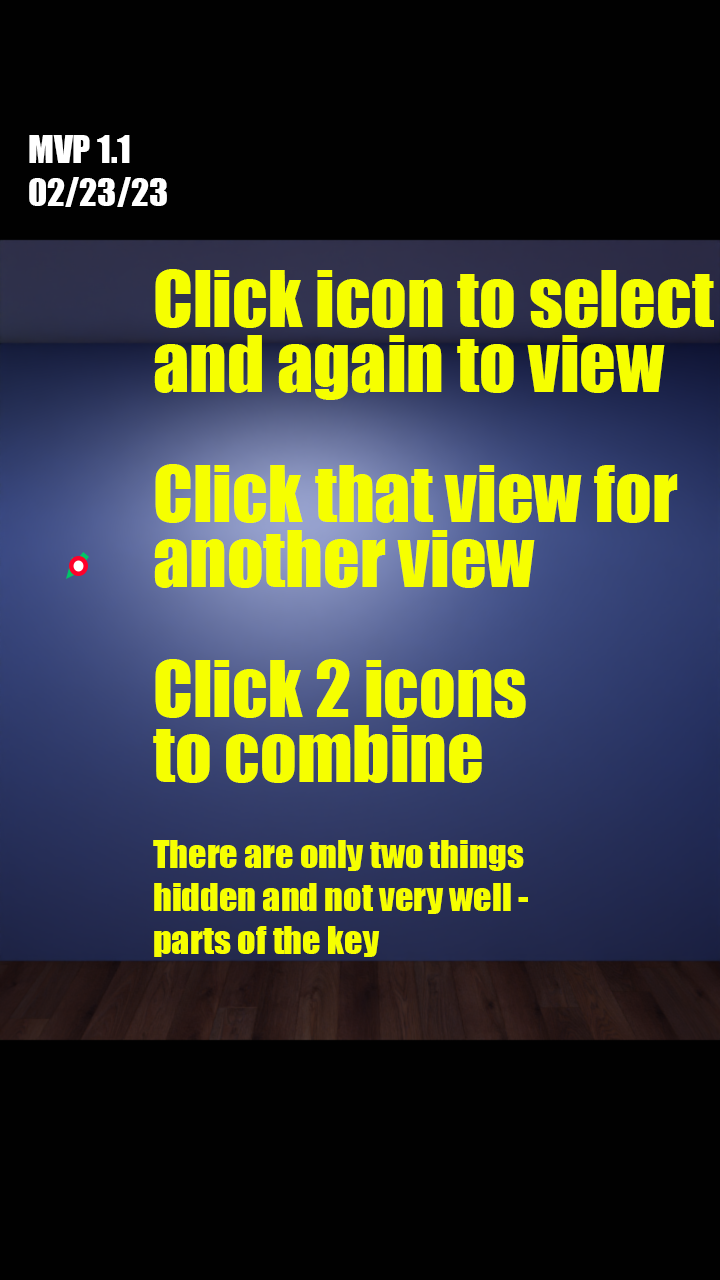
<style>
.page{position:relative;width:720px;height:1280px;background:#010101}
.page>*{position:absolute;margin:0}
.t1{font:36px "Impact";color:#ffffff}
.t2{font:72px/65px "Impact";color:#f6ff00}
.t3{font:36px "Impact";color:#f6ff00}
</style>
<div class="page">
<p class="t1" style="left:29px;top:135px;width:138px;height:72px">MVP 1.1<br>02/23/23</p>
<p class="t2" style="left:153px;top:269px;width:561px;height:514px">Click icon to select<br>and again to view<br><br>Click that view for <br>another view<br><br>Click 2 icons<br>to combine</p>
<p class="t3" style="left:153px;top:840px;width:375px;height:117px">There are only two things <br>hidden and not very well -<br>parts of the key</p>
</div>
